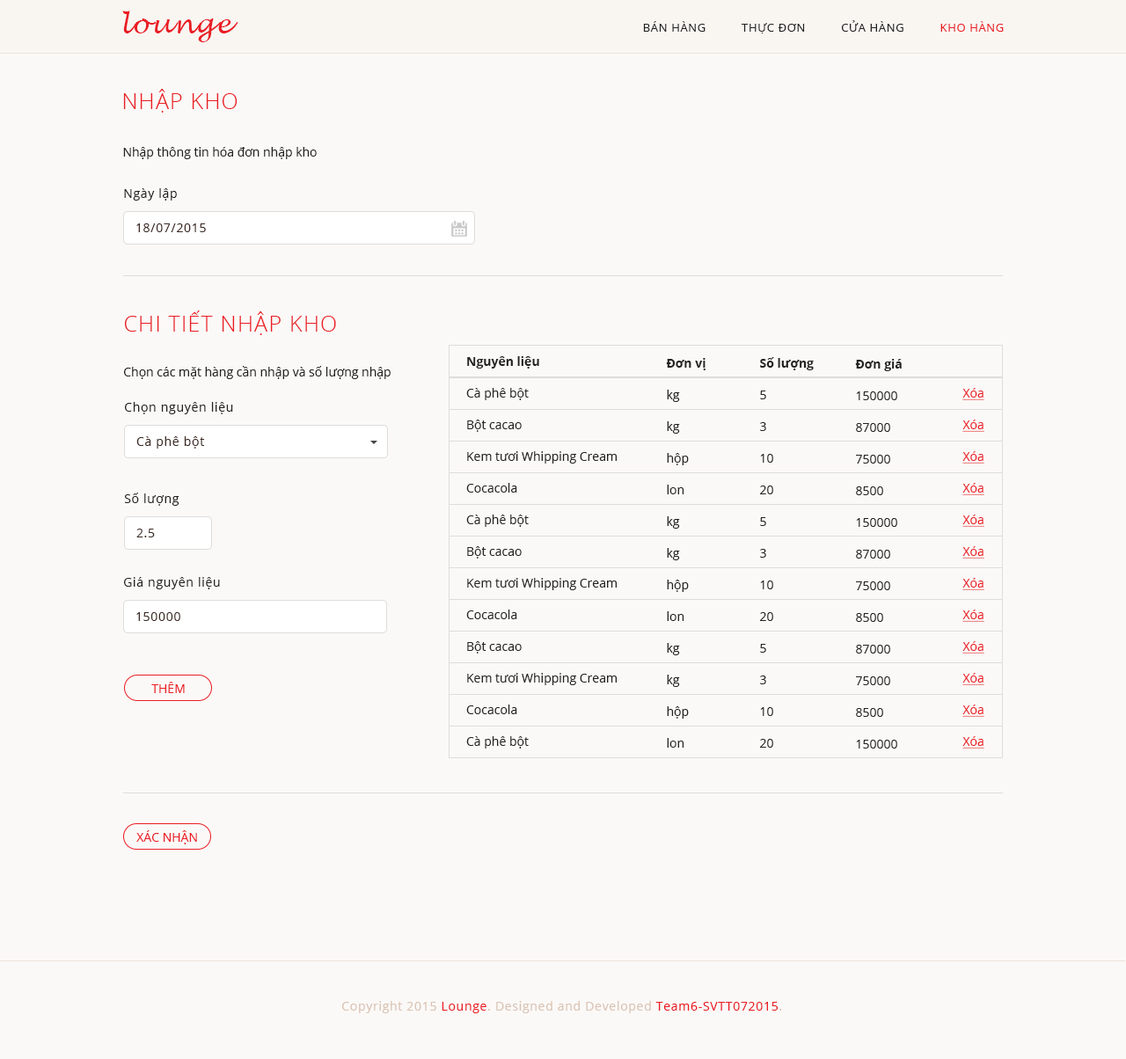
<style>
.page{position:relative;width:1126px;height:1059px;background:#fbf9f7}
.page>*{position:absolute;margin:0}
.t1{font:26.4px "LucidaHandwriting-Italic";letter-spacing:0.05em;color:#ea1d24}
.t2{font:11.4px "OpenSans";letter-spacing:0.05em;color:#222222}
.t3{font:11.4px "OpenSans";letter-spacing:0.05em;color:#ea1d24}
.t4{font:22px "OpenSans-Light";letter-spacing:0.05em;color:#ea1d24}
.t5{font:12.3px "OpenSans";color:#222222}
.t6{font:12.3px "OpenSans";letter-spacing:0.05em;color:#222222}
.t7{font:12.3px "OpenSans";letter-spacing:0.05em;color:#3d2a23}
.t8{font:12.3px/31.7px "OpenSans";color:#222222}
.t9{font:12.3px/31.7px "OpenSans-Bold";color:#222222}
.t10{font:12.3px/31.7px "OpenSans";color:#ea1d24;text-decoration:underline}
.t11{font:12.3px "OpenSans";color:#ea1d24}
.t12{font:12.3px "OpenSans";letter-spacing:0.05em;color:#dac3b4}
.t13{font:12.3px "OpenSans";letter-spacing:0.05em;color:#ea1b23}
</style>
<div class="page">
<p class="t1" style="left:122px;top:11px;width:116px;height:31px">lounge</p>
<p class="t2" style="left:643px;top:20px;width:361px;height:13px">BÁN HÀNG          THỰC ĐƠN          CỬA HÀNG          <span class="t3">KHO HÀNG</span></p>
<p class="t4" style="left:123px;top:89px;width:114px;height:24px">NHẬP KHO</p>
<p class="t5" style="left:123px;top:147px;width:194px;height:12px">Nhập thông tin hóa đơn nhập kho</p>
<p class="t6" style="left:124px;top:188px;width:53px;height:13px">Ngày lập</p>
<p class="t7" style="left:136px;top:223px;width:70px;height:9px">18/07/2015</p>
<p class="t4" style="left:125px;top:311px;width:211px;height:24px">CHI TIẾT NHẬP KHO</p>
<p class="t5" style="left:124px;top:366px;width:267px;height:13px">Chọn các mặt hàng cần nhập và số lượng nhập</p>
<p class="t8" style="left:466px;top:356px;width:151px;height:393px"><span class="t9">Nguyên liệu     <br></span>Cà phê bột     <br>Bột cacao       <br>Kem tươi Whipping Cream    <br>Cocacola   <br>Cà phê bột  <br>Bột cacao             <br>Kem tươi Whipping Cream   <br>Cocacola        <br>Bột cacao      <br>Kem tươi Whipping Cream  <br>Cocacola    <br>Cà phê bột</p>
<p class="t8" style="left:666px;top:358px;width:39px;height:390px"><span class="t9">Đơn vị<br></span>kg<br>kg<br>hộp<br>lon<br>kg<br>kg<br>hộp<br>lon<br>kg<br>kg<br>hộp<br>lon</p>
<p class="t8" style="left:760px;top:357px;width:54px;height:391px"><span class="t9">Số lượng<br></span>5<br>3<br>10<br>20<br>5<br>3<br>10<br>20<br>5<br>3<br>10<br>20</p>
<p class="t8" style="left:855px;top:359px;width:47px;height:390px"><span class="t9">Đơn giá<br></span>150000<br>87000<br>75000<br>8500<br>150000<br>87000<br>75000<br>8500<br>87000<br>75000<br>8500<br>150000</p>
<p class="t10" style="left:962px;top:388px;width:22px;height:361px">Xóa<br>Xóa<br>Xóa<br>Xóa<br>Xóa<br>Xóa<br>Xóa<br>Xóa<br>Xóa<br>Xóa<br>Xóa<br>Xóa</p>
<p class="t6" style="left:125px;top:402px;width:108px;height:12px">Chọn nguyên liệu</p>
<p class="t7" style="left:136px;top:436px;width:68px;height:13px">Cà phê bột</p>
<p class="t6" style="left:124px;top:493px;width:55px;height:13px">Số lượng</p>
<p class="t7" style="left:136px;top:529px;width:19px;height:8px">2.5</p>
<p class="t6" style="left:124px;top:577px;width:96px;height:12px">Giá nguyên liệu</p>
<p class="t7" style="left:136px;top:612px;width:44px;height:9px">150000</p>
<p class="t11" style="left:151px;top:682px;width:34px;height:11px">THÊM</p>
<p class="t11" style="left:136px;top:830px;width:61px;height:14px">XÁC NHẬN</p>
<p class="t12" style="left:342px;top:1001px;width:440px;height:12px">Copyright 2015 <span class="t13">Lounge</span>. Designed and Developed <span class="t13">Team6-SVTT072015</span>.</p>
</div>
